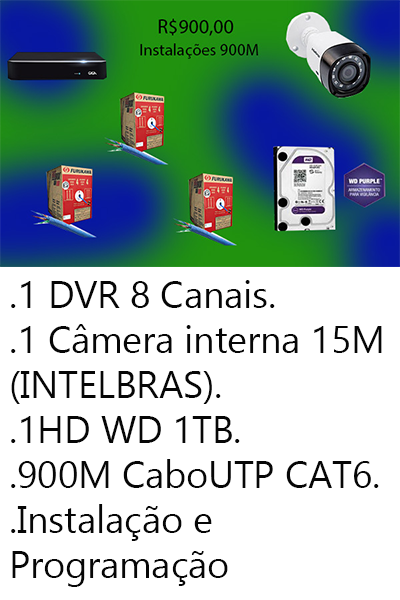
<style>
.page{position:relative;width:400px;height:600px;background:#ffffff}
.page>*{position:absolute;margin:0}
.t1{font:37.5px "Gadugi";color:#060606}
</style>
<div class="page">
<p class="t1" style="left:11px;top:280px;width:371px;height:307px">.1 DVR 8 Canais.<br>.1 Câmera interna 15M<br>(INTELBRAS).<br>.1HD WD 1TB.<br>.900M CaboUTP CAT6.<br>.Instalação e <br>Programação</p>
</div>
